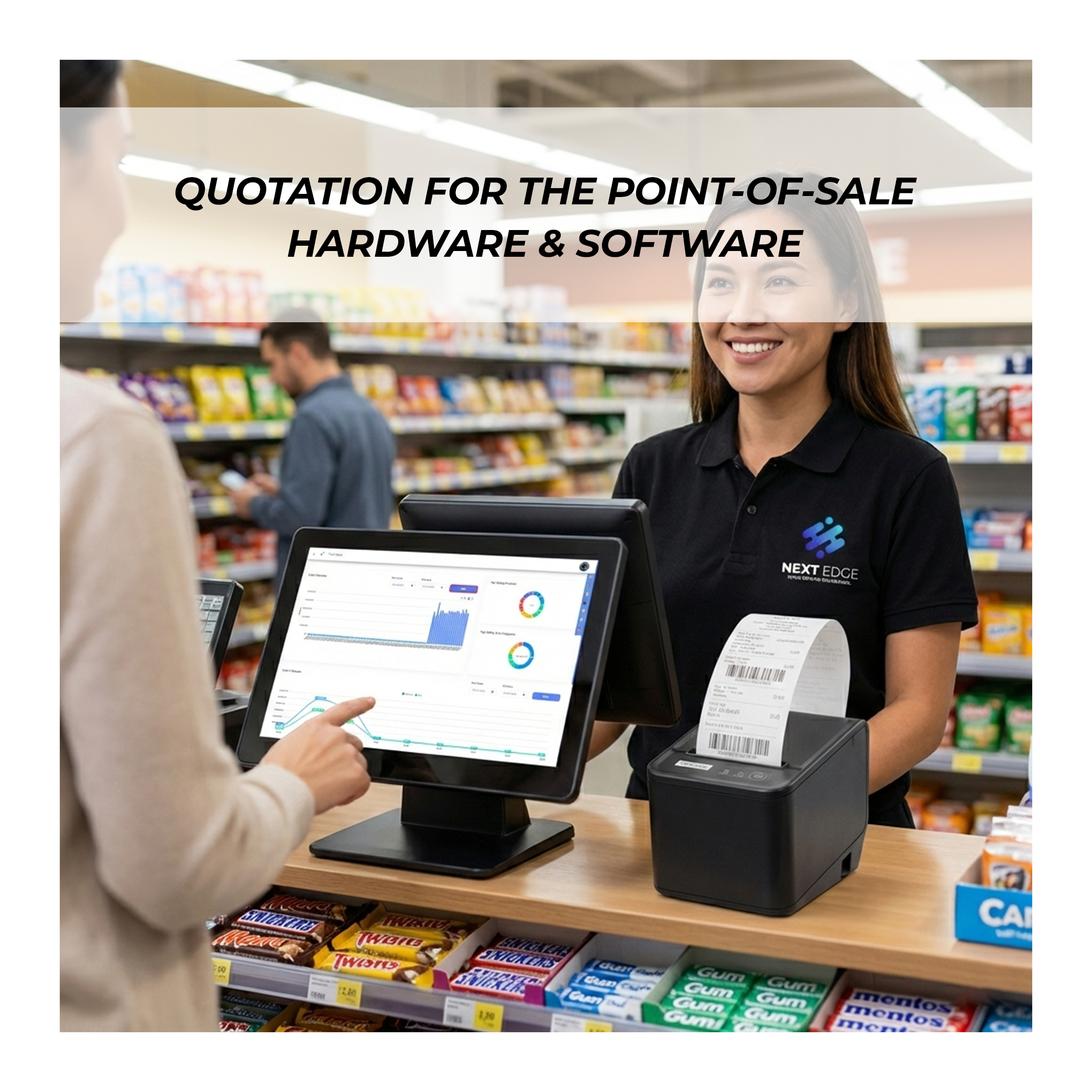
<style>
.page{position:relative;width:1092px;height:1092px}
.page>*{position:absolute;margin:0}
.t1{font:65.5px/52.4px "Montserrat-BoldItalic";letter-spacing:-0.01em;color:#000000}
</style>
<div class="page">
<p class="t1" style="left:175px;top:177px;width:742px;height:80px;text-align:center">QUOTATION FOR THE POINT-OF-SALE<br>HARDWARE &amp; SOFTWARE</p>
</div>
